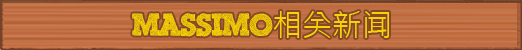
<style>
.page{position:relative;width:522px;height:50px}
.page>*{position:absolute;margin:0}
.t1{font:30px "ScribbleBoxDEMO";color:#f8d204}
.t2{font:30px "MicrosoftJhengHeiRegular";color:#f8d204}
</style>
<div class="page">
<p class="t1" style="left:132px;top:11px;width:257px;height:27px">Massimo<span class="t2">相关新闻</span></p>
</div>
